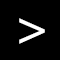
<style>
.page{position:relative;width:60px;height:60px;background:#000000}
.page>*{position:absolute;margin:0}
.t1{font:58.3px "STZhongsong";color:#ffffff}
</style>
<div class="page">
<p class="t1" style="left:19px;top:18px;width:26px;height:26px">&gt;</p>
<p class="t1" style="left:19px;top:18px;width:26px;height:26px">&gt;</p>
</div>
